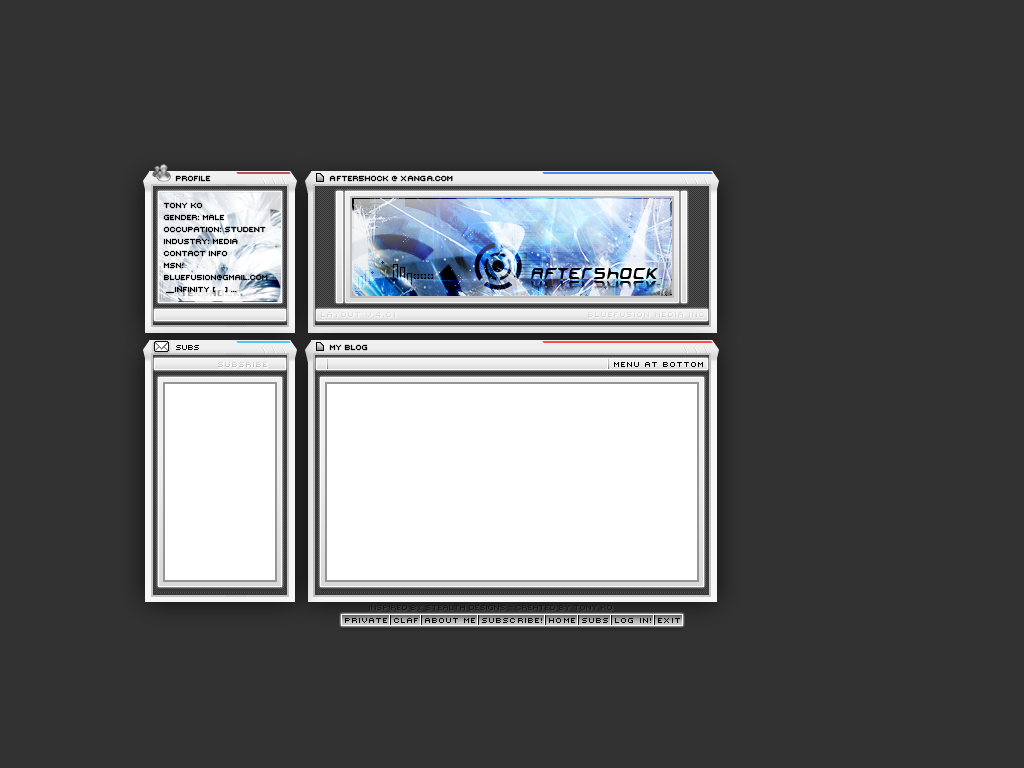
<style>
.page{position:relative;width:1024px;height:768px;background:#333232}
.page>*{position:absolute;margin:0}
.t1{font:10px "Mini7Tight";letter-spacing:0.001em;color:#000000;text-transform:uppercase}
.t2{font:10px "Mini7Tight";letter-spacing:0.1em;color:#000000;text-transform:uppercase}
.t3{font:24px "Miniskip";letter-spacing:0.001em;color:#000000;text-transform:uppercase}
.t4{font:24px "Miniskip";letter-spacing:0.001em;text-transform:uppercase}
.t5{font:10px "Mini7";letter-spacing:0.001em;color:#dddddd;text-transform:uppercase}
.t6{font:10px "Mini7";letter-spacing:0.001em;color:#cccccc;text-transform:uppercase}
.t7{font:10px "Mini7";letter-spacing:0.001em;color:#000000;text-transform:uppercase}
.t8{font:10px "Mini7Tight";letter-spacing:0.001em;color:#181818;text-transform:uppercase}
</style>
<div class="page">
<p class="t1" style="left:175px;top:175px;width:36px;height:7px">profile</p>
<p class="t1" style="left:329px;top:175px;width:124px;height:7px"><span class="t2">A</span>fter5hock @ <span class="t2">x</span>an<span class="t2">g</span>a.COM</p>
<p class="t1" style="left:163px;top:202px;width:105px;height:92px">TONY KO<br>Gender: Male<br>Occupation: Student <br>Industry: Media<br>Contact Info<br>MSN: <br>bluefu5ion@gmail.com<br> __INFINITY [   ] ...</p>
<p class="t3" style="left:531px;top:268px;width:127px;height:11px">after5hock</p>
<p class="t4" style="left:531px;top:281px;width:127px;height:11px">after5hock</p>
<p class="t5" style="left:321px;top:312px;width:74px;height:5px">LAYOUT V.4.01</p>
<p class="t5" style="left:588px;top:312px;width:116px;height:5px">BLUEFU5ION MEDIA inc</p>
<p class="t1" style="left:176px;top:345px;width:23px;height:5px">subs</p>
<p class="t1" style="left:329px;top:344px;width:39px;height:7px">mY blOG</p>
<p class="t6" style="left:218px;top:362px;width:49px;height:5px">subsribe</p>
<p class="t6" style="left:218px;top:362px;width:49px;height:5px">subsribe</p>
<p class="t7" style="left:614px;top:362px;width:89px;height:5px">Menu at Bottom</p>
<p class="t8" style="left:369px;top:605px;width:243px;height:5px">InSPIRED BY STEALTH DESIGNs :: Created by Tony Ko</p>
<p class="t7" style="left:345px;top:618px;width:42px;height:5px">private</p>
<p class="t7" style="left:345px;top:618px;width:42px;height:5px">private</p>
<p class="t7" style="left:394px;top:618px;width:24px;height:5px">claf</p>
<p class="t7" style="left:394px;top:618px;width:24px;height:5px">claf</p>
<p class="t7" style="left:425px;top:618px;width:50px;height:5px">about me</p>
<p class="t7" style="left:425px;top:618px;width:50px;height:5px">about me</p>
<p class="t7" style="left:482px;top:618px;width:60px;height:5px">SUBScRIBE!</p>
<p class="t7" style="left:482px;top:618px;width:60px;height:5px">SUBScRIBE!</p>
<p class="t7" style="left:549px;top:618px;width:26px;height:5px">home</p>
<p class="t7" style="left:549px;top:618px;width:26px;height:5px">home</p>
<p class="t7" style="left:582px;top:618px;width:26px;height:5px">subs</p>
<p class="t7" style="left:582px;top:618px;width:26px;height:5px">subs</p>
<p class="t7" style="left:615px;top:618px;width:36px;height:5px">log in!</p>
<p class="t7" style="left:615px;top:618px;width:36px;height:5px">log in!</p>
<p class="t7" style="left:658px;top:618px;width:22px;height:5px">exit</p>
<p class="t7" style="left:658px;top:618px;width:22px;height:5px">exit</p>
</div>
